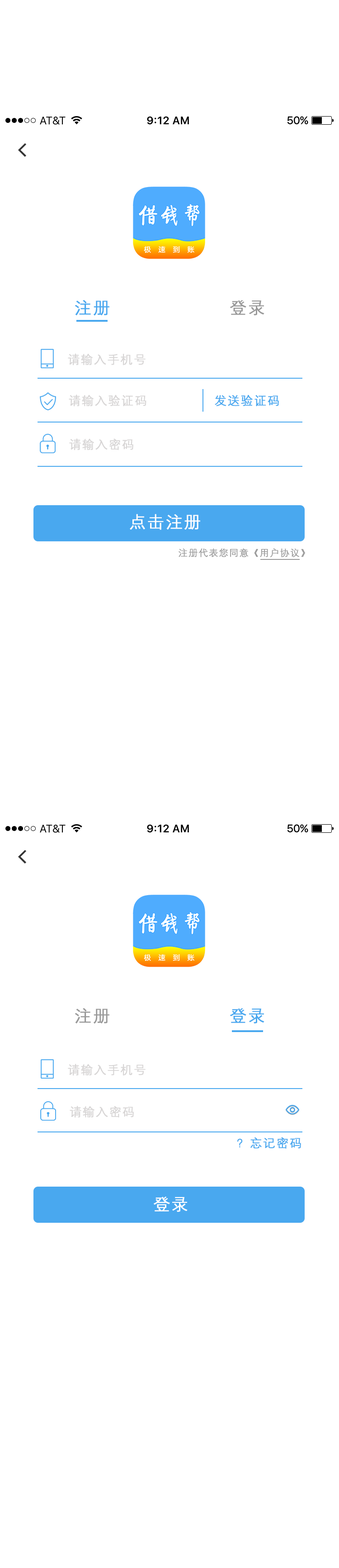
<style>
.page{position:relative;width:339px;height:1568px;background:#ffffff}
.page>*{position:absolute;margin:0}
.t1{font:16.3px "HYZhongJianHeiJ";letter-spacing:0.1em;color:#49a8ef;font-weight:bold}
.t2{font:16.3px "HYZhongJianHeiJ";letter-spacing:0.1em;color:#999999;font-weight:bold}
.t3{font:11.7px "HYZhongJianHeiJ";letter-spacing:0.1em;color:#d7d5d5;font-weight:bold}
.t4{font:11.7px "HYZhongJianHeiJ";letter-spacing:0.1em;color:#49a8ef;font-weight:bold}
.t5{font:16.3px "HYZhongJianHeiJ";letter-spacing:0.1em;color:#ffffff;font-weight:bold}
.t6{font:9px "HYZhongJianHeiJ";letter-spacing:0.1em;color:#999999;font-weight:bold}
</style>
<div class="page">
<p class="t1" style="left:75px;top:300px;width:34px;height:15px">注册</p>
<p class="t2" style="left:230px;top:300px;width:34px;height:15px">登录</p>
<p class="t3" style="left:68px;top:353px;width:78px;height:12px">请输入手机号</p>
<p class="t3" style="left:69px;top:394px;width:77px;height:12px">请输入验证码</p>
<p class="t4" style="left:215px;top:395px;width:64px;height:11px">发送验证码</p>
<p class="t3" style="left:69px;top:438px;width:64px;height:12px">请输入密码</p>
<p class="t5" style="left:130px;top:514px;width:70px;height:16px">点击注册</p>
<p class="t6" style="left:178px;top:548px;width:127px;height:10px">注册代表您同意《用户协议》</p>
<p class="t2" style="left:75px;top:1008px;width:34px;height:15px">注册</p>
<p class="t1" style="left:230px;top:1008px;width:34px;height:15px">登录</p>
<p class="t3" style="left:68px;top:1064px;width:78px;height:11px">请输入手机号</p>
<p class="t3" style="left:70px;top:1106px;width:64px;height:11px">请输入密码</p>
<p class="t4" style="left:237px;top:1137px;width:64px;height:12px">？忘记密码</p>
<p class="t5" style="left:154px;top:1197px;width:34px;height:15px">登录</p>
</div>
